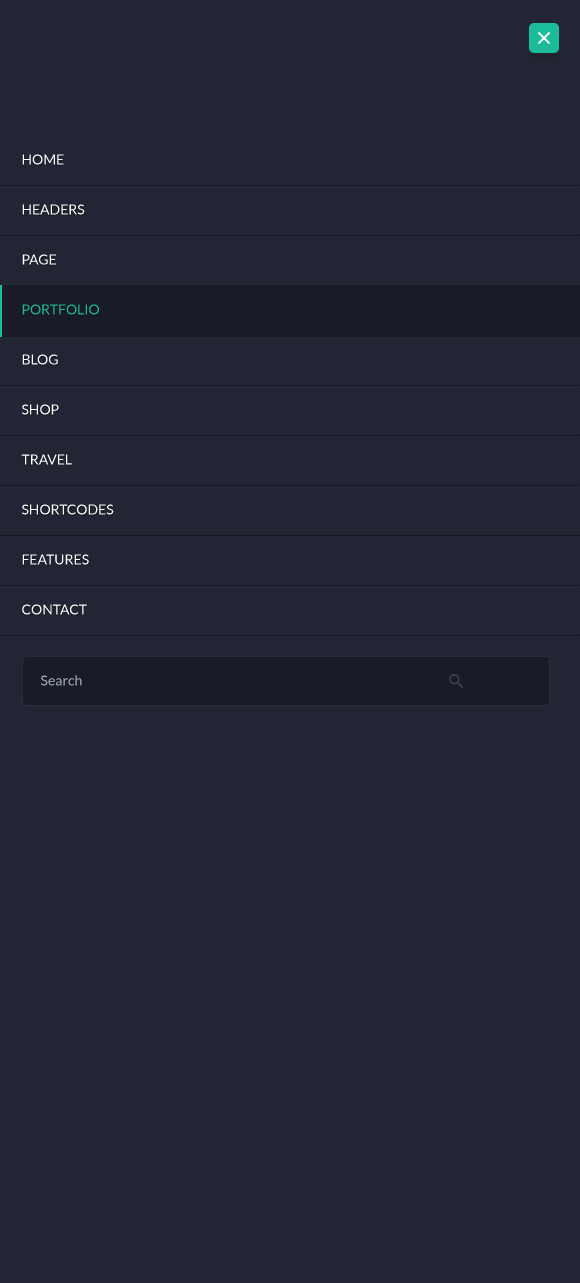
<style>
.page{position:relative;width:580px;height:1283px;background:#222533}
.page>*{position:absolute;margin:0}
.t1{font:14px/50px "Lato-Regular";color:#ffffff;text-transform:uppercase}
.t2{font:14px/50px "Lato-Regular";color:#1abc9c;text-transform:uppercase}
.t3{font:14px "Lato-Regular";color:#a1b1bc}
</style>
<div class="page">
<p class="t1" style="left:21px;top:154px;width:93px;height:461px">Home<br>HEADERS<br>Page<br><span class="t2">Portfolio<br></span>Blog<br>shop<br>travel<br>shortcodes<br>features<br>contact</p>
<p class="t3" style="left:41px;top:675px;width:41px;height:11px">Search</p>
</div>
